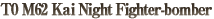
<style>
.page{position:relative;width:214px;height:19px;background:#ffffff}
.page>*{position:absolute;margin:0}
.t1{font:16px "RyuminPro-ExBold";letter-spacing:-0.08em;color:#4a3f32;font-weight:bold;scale:0.9 1}
</style>
<div class="page">
<p class="t1" style="left:0px;top:3px;width:212px;height:16px">T0 M62 Kai Night Fighter-bomber</p>
</div>
